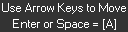
<style>
.page{position:relative;width:128px;height:32px;background:#333333}
.page>*{position:absolute;margin:0}
.t1{font:12px/16px "Small Fonts";color:#ffffff}
</style>
<div class="page">
<p class="t1" style="left:2px;top:3px;width:124px;height:27px;text-align:center">Use Arrow Keys to Move<br>Enter or Space = [A]</p>
</div>
